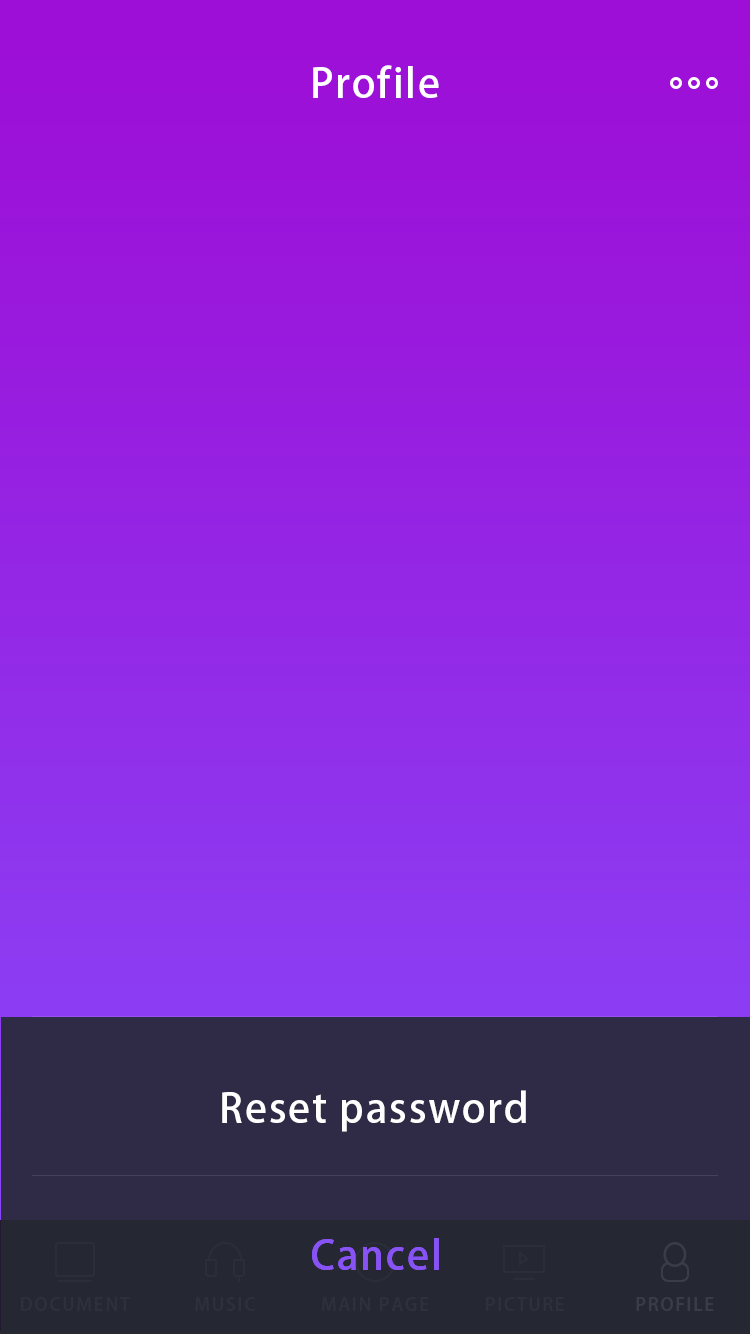
<style>
.page{position:relative;width:750px;height:1334px}
.page>*{position:absolute;margin:0}
.t1{font:40px "AdobeHeitiStd-Regular";letter-spacing:0.05em;color:#ffffff}
.t2{font:40px "AdobeHeitiStd-Regular";letter-spacing:0.05em;color:#8853f5}
.t3{font:18px "AdobeHeitiStd-Regular";letter-spacing:0.1em;color:#2e303b;text-transform:uppercase}
.t4{font:18px "AdobeHeitiStd-Regular";letter-spacing:0.1em;color:#3a3d47;text-transform:uppercase}
</style>
<div class="page">
<p class="t1" style="left:313px;top:65px;width:126px;height:33px">Profile</p>
<p class="t1" style="left:222px;top:1090px;width:304px;height:42px">Reset password</p>
<p class="t2" style="left:312px;top:1238px;width:127px;height:32px">Cancel</p>
<p class="t2" style="left:312px;top:1238px;width:127px;height:32px">Cancel</p>
<p class="t3" style="left:21px;top:1297px;width:109px;height:14px">document</p>
<p class="t3" style="left:195px;top:1297px;width:60px;height:14px">music</p>
<p class="t3" style="left:322px;top:1297px;width:107px;height:14px">main page</p>
<p class="t3" style="left:486px;top:1297px;width:78px;height:14px">picture</p>
<p class="t4" style="left:636px;top:1297px;width:78px;height:14px">profile</p>
</div>
